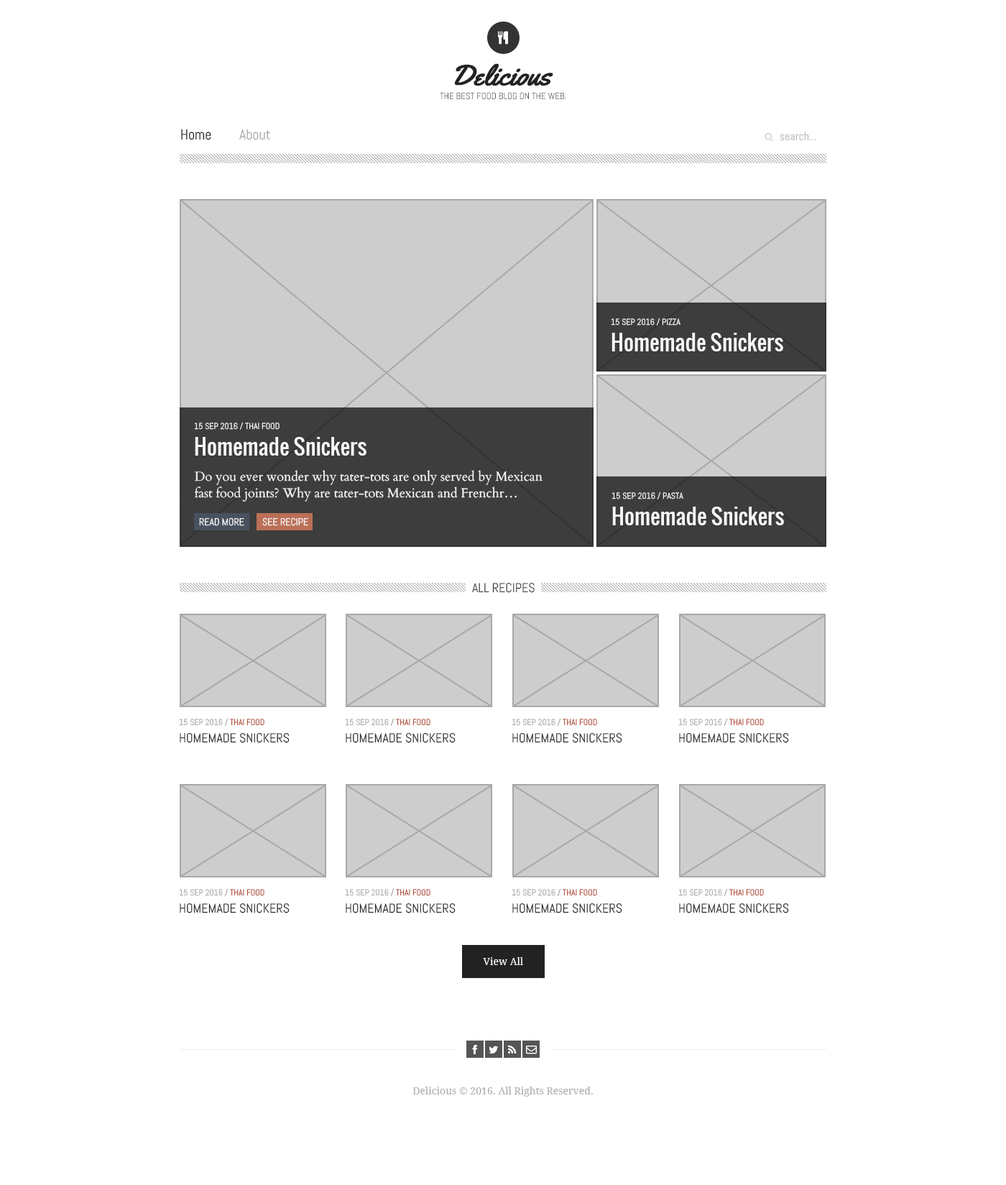
<style>
.page{position:relative;width:1006px;height:1185px;background:#ffffff}
.page>*{position:absolute;margin:0}
.t1{font:28.7px "Yellowtail";color:#222222;font-weight:bold}
.t2{font:9.3px "Abel-Regular";color:#555555;text-transform:uppercase}
.t3{font:14.4px "Abel-Regular";color:#222222}
.t4{font:14.4px "Abel-Regular";color:#aaaaaa}
.t5{font:11.5px "Abel-Regular";color:#aaaaaa}
.t6{font:8.6px "Abel-Regular";color:#f7f7f7;text-transform:uppercase}
.t7{font:21.6px "Oswald-Regular";color:#f7f7f7}
.t8{font:12.9px/16.5px "Cardo-Regular";color:#f7f7f7}
.t9{font:10.1px "Abel-Regular";color:#f7f7f7;text-transform:uppercase}
.t10{font:12.9px "Abel-Regular";color:#444444;text-transform:uppercase}
.t11{font:8.6px "Abel-Regular";color:#aaaaaa;text-transform:uppercase}
.t12{font:8.6px "Abel-Regular";color:#999999;text-transform:uppercase}
.t13{font:8.6px "Abel-Regular";color:#b1452e;text-transform:uppercase}
.t14{font:12.9px "Abel-Regular";color:#222222;text-transform:uppercase}
.t15{font:10.1px "DroidSerif";color:#ffffff}
.t16{font:10.1px "DroidSerif";color:#aaaaaa}
</style>
<div class="page">
<p class="t1" style="left:454px;top:63px;width:99px;height:23px">Delicious</p>
<p class="t2" style="left:440px;top:92px;width:126px;height:8px">The best food blog on the web.</p>
<p class="t3" style="left:181px;top:129px;width:30px;height:11px">Home</p>
<p class="t4" style="left:239px;top:129px;width:31px;height:11px">About</p>
<p class="t5" style="left:780px;top:132px;width:36px;height:9px">search...</p>
<p class="t6" style="left:611px;top:318px;width:70px;height:8px">15 sep 2016 / Pizza</p>
<p class="t7" style="left:612px;top:333px;width:171px;height:18px">Homemade Snickers</p>
<p class="t6" style="left:194px;top:422px;width:86px;height:8px">15 sep 2016 / Thai Food</p>
<p class="t7" style="left:195px;top:437px;width:172px;height:19px">Homemade Snickers</p>
<p class="t8" style="left:195px;top:470px;width:348px;height:32px">Do you ever wonder why tater-tots are only served by Mexican fast food joints? Why are tater-tots Mexican and Frenchr…</p>
<p class="t6" style="left:612px;top:492px;width:71px;height:7px">15 sep 2016 / Pasta</p>
<p class="t7" style="left:612px;top:507px;width:172px;height:18px">Homemade Snickers</p>
<p class="t9" style="left:199px;top:517px;width:45px;height:9px">Read More</p>
<p class="t9" style="left:262px;top:517px;width:46px;height:9px">See Recipe</p>
<p class="t10" style="left:472px;top:583px;width:63px;height:10px">All Recipes</p>
<p class="t11" style="left:179px;top:718px;width:85px;height:8px">15 sep 2016<span class="t12"> / </span><span class="t13">Thai Food</span></p>
<p class="t11" style="left:345px;top:718px;width:85px;height:8px">15 sep 2016<span class="t12"> / </span><span class="t13">Thai Food</span></p>
<p class="t11" style="left:512px;top:718px;width:85px;height:8px">15 sep 2016<span class="t12"> / </span><span class="t13">Thai Food</span></p>
<p class="t11" style="left:678px;top:718px;width:86px;height:8px">15 sep 2016<span class="t12"> / </span><span class="t13">Thai Food</span></p>
<p class="t14" style="left:180px;top:733px;width:110px;height:10px">Homemade Snickers</p>
<p class="t14" style="left:346px;top:733px;width:110px;height:10px">Homemade Snickers</p>
<p class="t14" style="left:512px;top:733px;width:110px;height:10px">Homemade Snickers</p>
<p class="t14" style="left:679px;top:733px;width:110px;height:10px">Homemade Snickers</p>
<p class="t11" style="left:179px;top:888px;width:85px;height:8px">15 sep 2016<span class="t12"> / </span><span class="t13">Thai Food</span></p>
<p class="t11" style="left:345px;top:888px;width:85px;height:8px">15 sep 2016<span class="t12"> / </span><span class="t13">Thai Food</span></p>
<p class="t11" style="left:512px;top:888px;width:85px;height:8px">15 sep 2016<span class="t12"> / </span><span class="t13">Thai Food</span></p>
<p class="t11" style="left:678px;top:888px;width:86px;height:8px">15 sep 2016<span class="t12"> / </span><span class="t13">Thai Food</span></p>
<p class="t14" style="left:180px;top:903px;width:110px;height:10px">Homemade Snickers</p>
<p class="t14" style="left:346px;top:903px;width:110px;height:10px">Homemade Snickers</p>
<p class="t14" style="left:512px;top:903px;width:110px;height:10px">Homemade Snickers</p>
<p class="t14" style="left:679px;top:903px;width:110px;height:10px">Homemade Snickers</p>
<p class="t15" style="left:483px;top:957px;width:40px;height:8px">View All</p>
<p class="t16" style="left:413px;top:1087px;width:180px;height:10px">Delicious © 2016. All Rights Reserved.</p>
</div>
